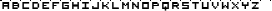
<style>
.page{position:relative;width:272px;height:11px;background:#ffffff}
.page>*{position:absolute;margin:0}
.t1{font:13px "VisitorTT1BRK";letter-spacing:0.185em;color:#000000}
</style>
<div class="page">
<p class="t1" style="left:2px;top:2px;width:257px;height:9px">ABCDEFGHIJKLMNOPQRSTUVWXYZ</p>
</div>
